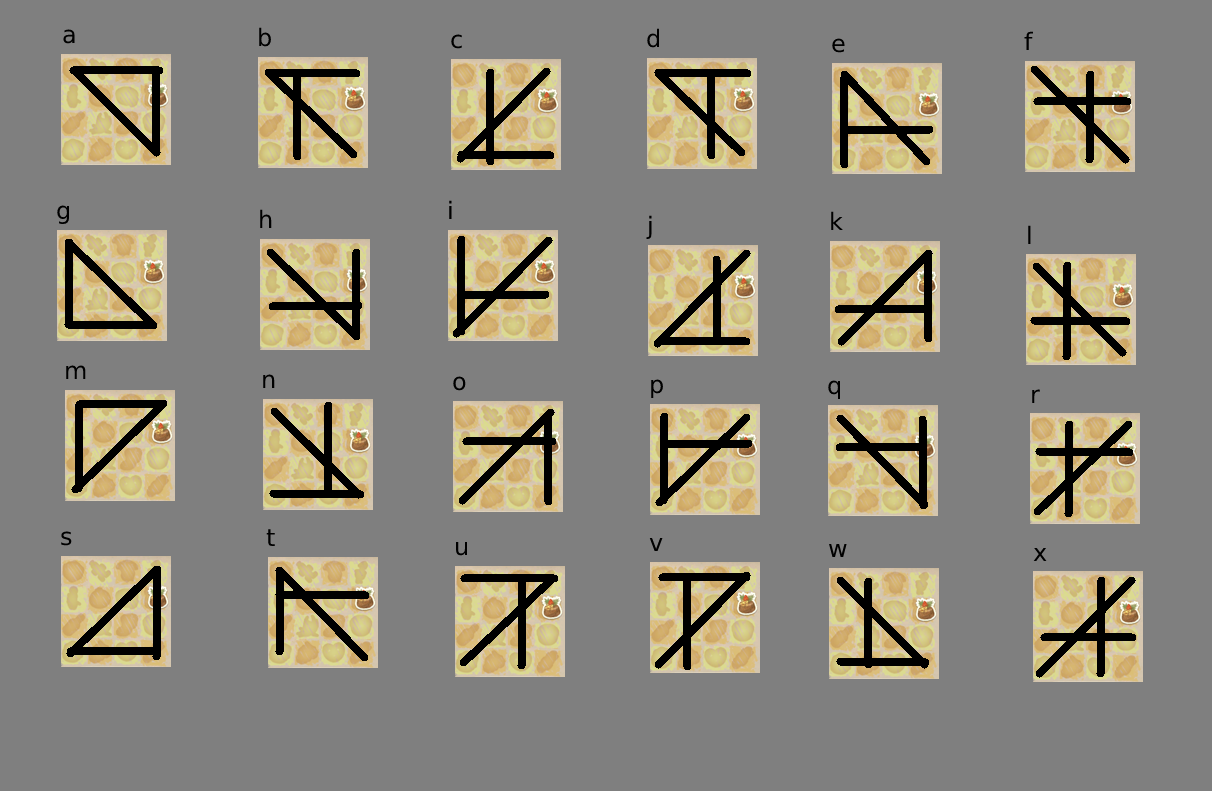
<style>
.page{position:relative;width:1212px;height:791px;background:#7f7f7f}
.page>*{position:absolute;margin:0}
.t1{font:24px "DejaVuSans";color:#000000}
</style>
<div class="page">
<p class="t1" style="left:63px;top:29px;width:12px;height:15px">a</p>
<p class="t1" style="left:259px;top:27px;width:12px;height:20px">b</p>
<p class="t1" style="left:647px;top:28px;width:13px;height:20px">d</p>
<p class="t1" style="left:451px;top:34px;width:11px;height:15px">c</p>
<p class="t1" style="left:832px;top:38px;width:13px;height:15px">e</p>
<p class="t1" style="left:1024px;top:31px;width:9px;height:19px">f</p>
<p class="t1" style="left:57px;top:205px;width:13px;height:19px">g</p>
<p class="t1" style="left:260px;top:209px;width:12px;height:19px">h</p>
<p class="t1" style="left:449px;top:200px;width:3px;height:19px">i</p>
<p class="t1" style="left:646px;top:215px;width:6px;height:24px">j</p>
<p class="t1" style="left:831px;top:211px;width:12px;height:19px">k</p>
<p class="t1" style="left:1028px;top:225px;width:3px;height:19px">l</p>
<p class="t1" style="left:66px;top:365px;width:20px;height:14px">m</p>
<p class="t1" style="left:263px;top:374px;width:12px;height:14px">n</p>
<p class="t1" style="left:453px;top:376px;width:13px;height:15px">o</p>
<p class="t1" style="left:651px;top:379px;width:12px;height:19px">p</p>
<p class="t1" style="left:828px;top:380px;width:13px;height:19px">q</p>
<p class="t1" style="left:1032px;top:389px;width:8px;height:14px">r</p>
<p class="t1" style="left:61px;top:531px;width:11px;height:15px">s</p>
<p class="t1" style="left:266px;top:529px;width:9px;height:17px">t</p>
<p class="t1" style="left:456px;top:541px;width:12px;height:15px">u</p>
<p class="t1" style="left:649px;top:537px;width:14px;height:14px">v</p>
<p class="t1" style="left:829px;top:543px;width:18px;height:14px">w</p>
<p class="t1" style="left:1033px;top:547px;width:14px;height:14px">x</p>
</div>
